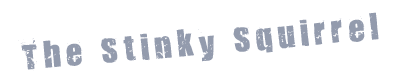
<style>
.page{position:relative;width:400px;height:77px;background:#ffffff}
.page>*{position:absolute;margin:0}
.t1{font:30.5px "321impact";letter-spacing:0.16em;color:#939bad}
</style>
<div class="page">
<p class="t1" style="left:18px;top:12px;width:361px;height:59px;rotate:-5deg">The Stinky Squirrel</p>
</div>
